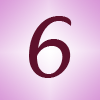
<style>
.page{position:relative;width:100px;height:100px}
.page>*{position:absolute;margin:0}
.t1{font:83.3px "LucidaHandwriting-Italic";color:#5e112c}
</style>
<div class="page">
<p class="t1" style="left:29px;top:16px;width:43px;height:62px">6</p>
</div>
